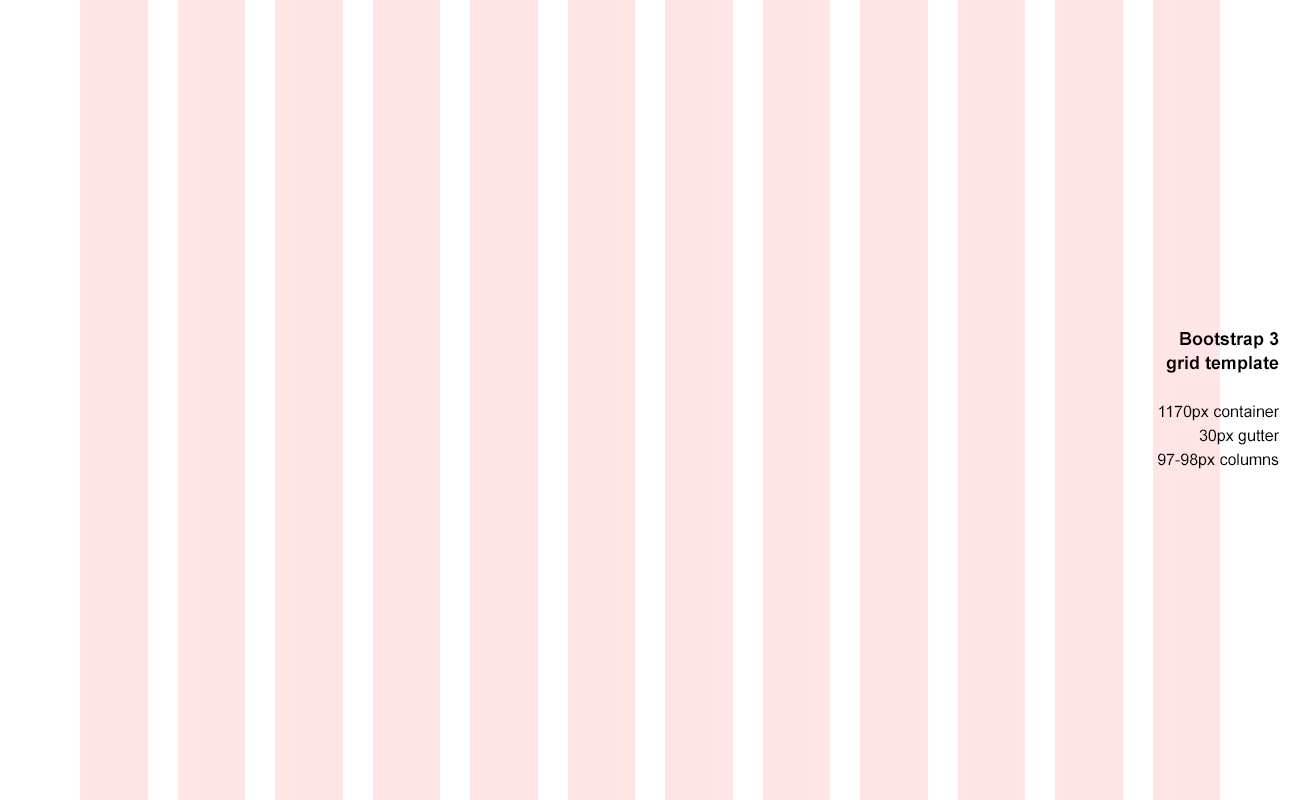
<style>
.page{position:relative;width:1300px;height:800px;background:#ffe5e5}
.page>*{position:absolute;margin:0}
.t1{font:16px/24px "ArialMT";color:#000000}
.t2{font:18px/24px "Arial-BoldMT";color:#000000}
</style>
<div class="page">
<p class="t1" style="left:1158px;top:332px;width:122px;height:137px;text-align:right"><span class="t2">Bootstrap 3<br>grid template<br><br></span>1170px container<br>30px gutter<br>97-98px columns</p>
</div>
